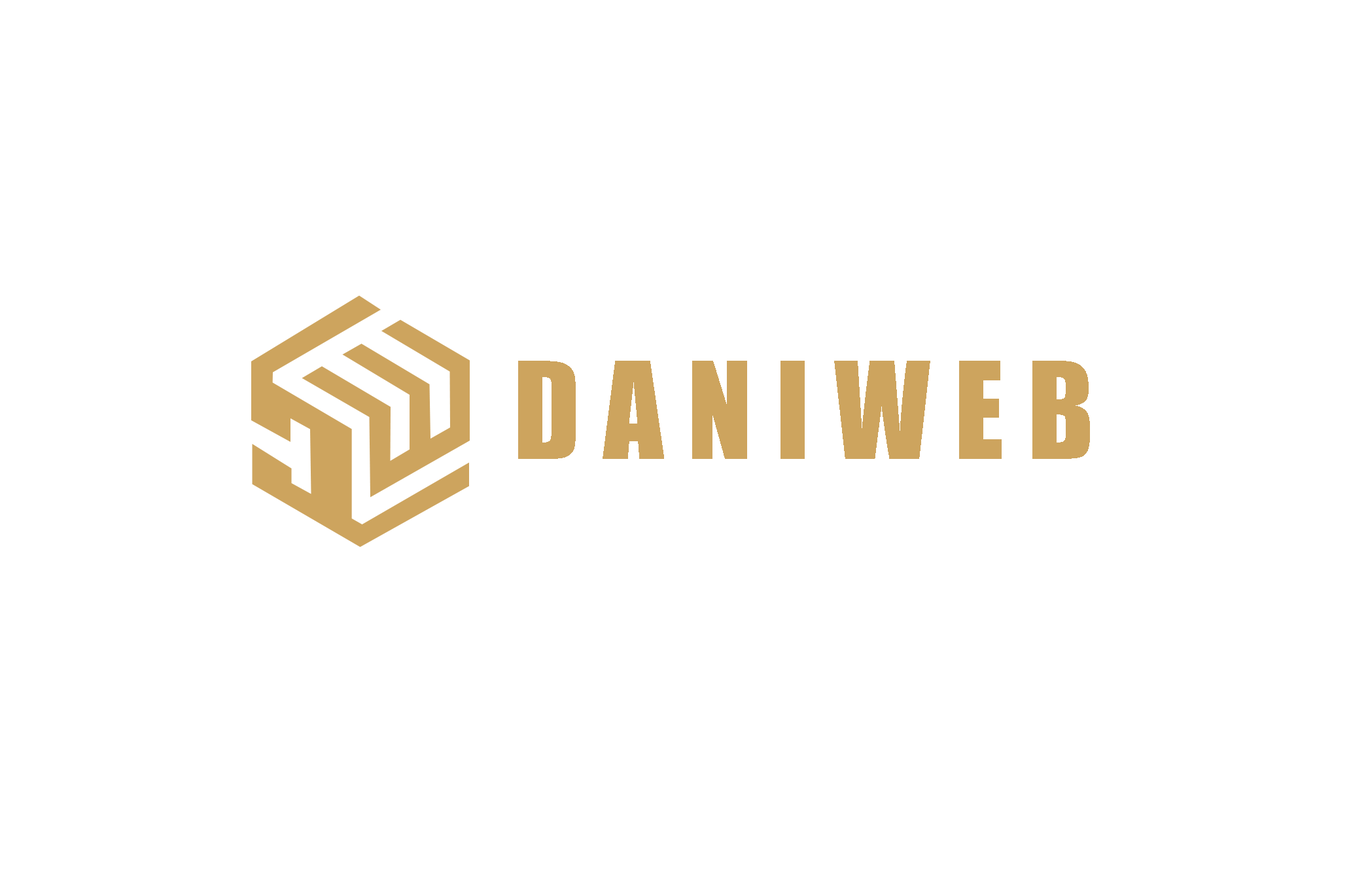
<style>
.page{position:relative;width:1368px;height:872px;background:#ffffff}
.page>*{position:absolute;margin:0}
.t1{font:124.3px "Impact";letter-spacing:0.2em;color:#cda45e;scale:0.96 1}
</style>
<div class="page">
<p class="t1" style="left:518px;top:361px;width:572px;height:98px">DANIWEB</p>
</div>
